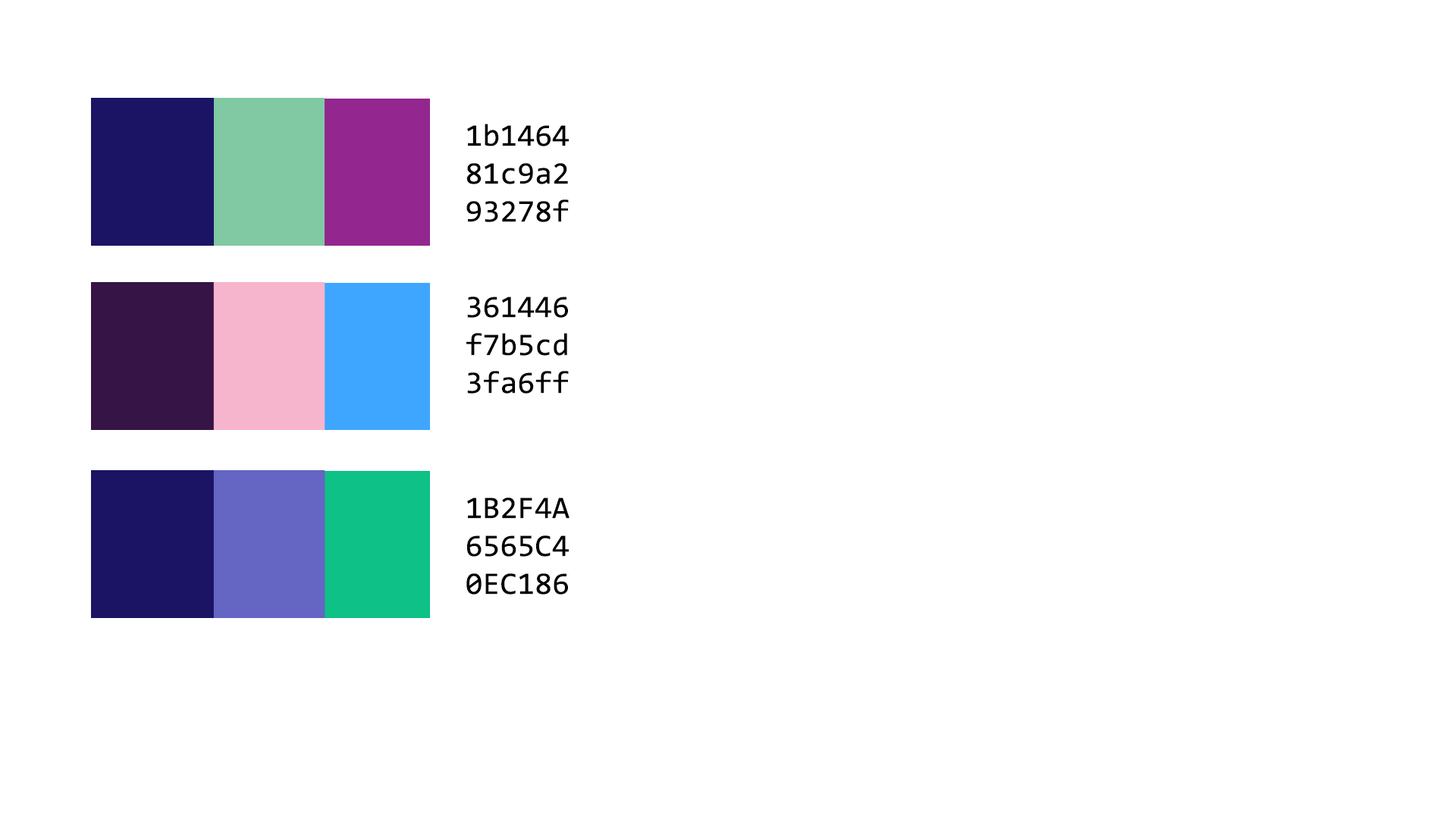
<style>
.page{position:relative;width:1456px;height:819px;background:#ffffff}
.page>*{position:absolute;margin:0}
.t1{font:31.6px "Consolas";color:#010101}
</style>
<div class="page">
<p class="t1" style="left:466px;top:124px;width:103px;height:98px;text-align:center">1b1464<br>81c9a2<br>93278f</p>
<p class="t1" style="left:466px;top:297px;width:103px;height:97px;text-align:center">361446<br>f7b5cd<br>3fa6ff</p>
<p class="t1" style="left:466px;top:497px;width:104px;height:98px;text-align:center">1B2F4A<br>6565C4<br>0EC186</p>
</div>
